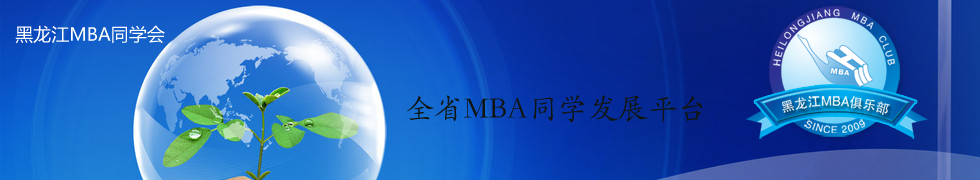
<style>
.page{position:relative;width:980px;height:180px}
.page>*{position:absolute;margin:0}
.t1{font:18px "MicrosoftYaHei";color:#fefffe}
.t2{font:30px "STKaiti";color:#101511}
.t3{font:13px "FZHTK--GBK1-0";color:#ffffff}
.t4{font:10px "FZHTK--GBK1-0";letter-spacing:0.09em;color:#ffffff}
.t5{font:8.2px "FZHTK--GBK1-0";letter-spacing:0.05em;color:#ffffff}
</style>
<div class="page">
<p class="t1" style="left:15px;top:25px;width:150px;height:19px">黑龙江MBA同学会</p>
<p class="t2" style="left:407px;top:95px;width:295px;height:28px">全省MBA同学发展平台</p>
<p class="t3" style="left:782px;top:96px;width:108px;height:19px">黑龙江MBA俱乐部</p>
<p class="t4" style="left:804px;top:119px;width:61px;height:14px"><span class="t5">                           </span>SINCE 2009</p>
</div>
